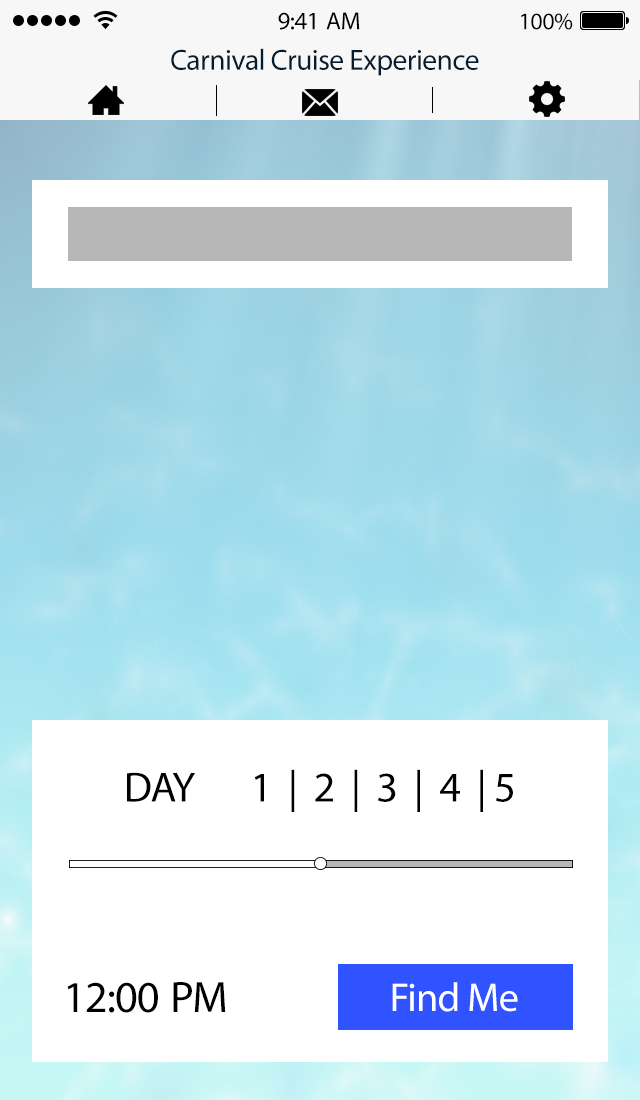
<style>
.page{position:relative;width:640px;height:1100px;background:#ffffff}
.page>*{position:absolute;margin:0}
.t1{font:25px "MyriadPro-Regular";letter-spacing:-0.02em;color:#000000}
.t2{font:24px "MyriadPro-Regular";letter-spacing:-0.02em;color:#000000}
.t3{font:29.4px "MyriadPro-Regular";letter-spacing:-0.02em;color:#061d30}
.t4{font:42.3px "MyriadPro-Regular";letter-spacing:-0.02em;color:#000000}
.t5{font:44.2px "MyriadPro-Regular";letter-spacing:-0.02em;color:#000000}
.t6{font:40.5px "MyriadPro-Regular";letter-spacing:-0.02em;color:#ffffff}
</style>
<div class="page">
<p class="t1" style="left:278px;top:12px;width:82px;height:18px">9:41 AM</p>
<p class="t2" style="left:521px;top:13px;width:52px;height:17px">100%</p>
<p class="t3" style="left:171px;top:48px;width:308px;height:28px">Carnival Cruise Experience</p>
<p class="t4" style="left:127px;top:769px;width:386px;height:43px">DAY 1  |  2  |  3  |  4  | 5</p>
<p class="t5" style="left:67px;top:982px;width:159px;height:31px">12:00 PM</p>
<p class="t6" style="left:392px;top:982px;width:126px;height:30px">Find Me</p>
</div>
